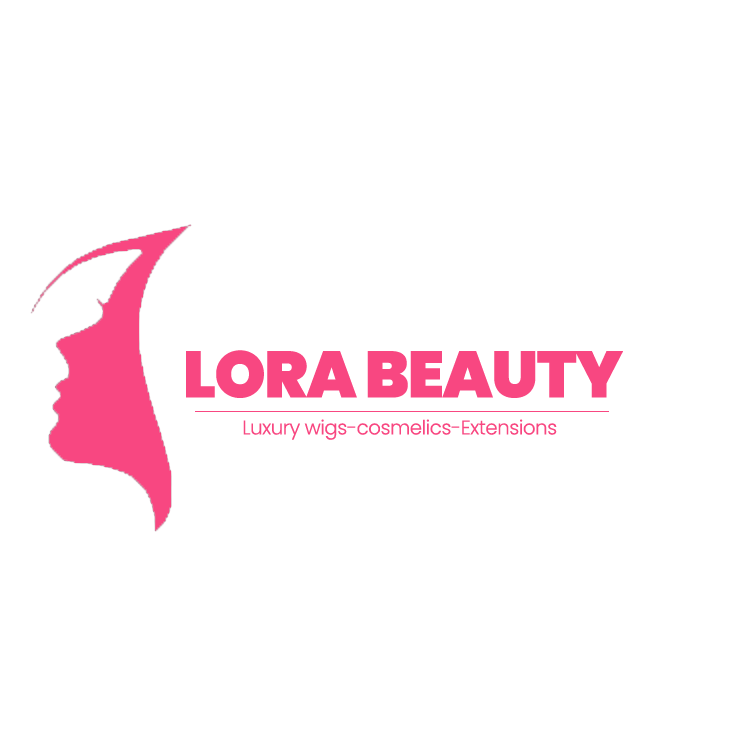
<style>
.page{position:relative;width:740px;height:740px;background:#ffffff}
.page>*{position:absolute;margin:0}
.t1{font:65.3px "Poppins-Black";letter-spacing:-0.025em;color:#f84781}
.t2{font:19.8px "Poppins-Light";letter-spacing:-0.025em;color:#f84781}
</style>
<div class="page">
<p class="t1" style="left:186px;top:350px;width:437px;height:48px">LORA BEAUTY</p>
<p class="t2" style="left:243px;top:419px;width:314px;height:21px">Luxury wigs-cosmelics-Extensions</p>
</div>
